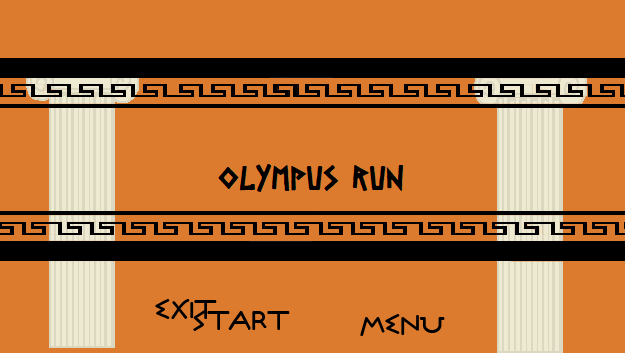
<style>
.page{position:relative;width:625px;height:353px;background:#dc7b2e}
.page>*{position:absolute;margin:0}
.t1{font:32px "OlympusBold";color:#000000}
</style>
<div class="page">
<p class="t1" style="left:155px;top:299px;width:62px;height:20px">EXIT</p>
<p class="t1" style="left:193px;top:310px;width:97px;height:21px">START</p>
<p class="t1" style="left:360px;top:314px;width:85px;height:22px">MENU</p>
</div>
